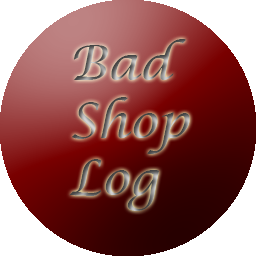
<style>
.page{position:relative;width:256px;height:256px;background:#ffffff}
.page>*{position:absolute;margin:0}
.t1{font:48px "LucidaCalligraphy-Italic"}
</style>
<div class="page">
<p class="t1" style="left:69px;top:39px;width:121px;height:172px">Bad<br>Shop<br>Log</p>
</div>
